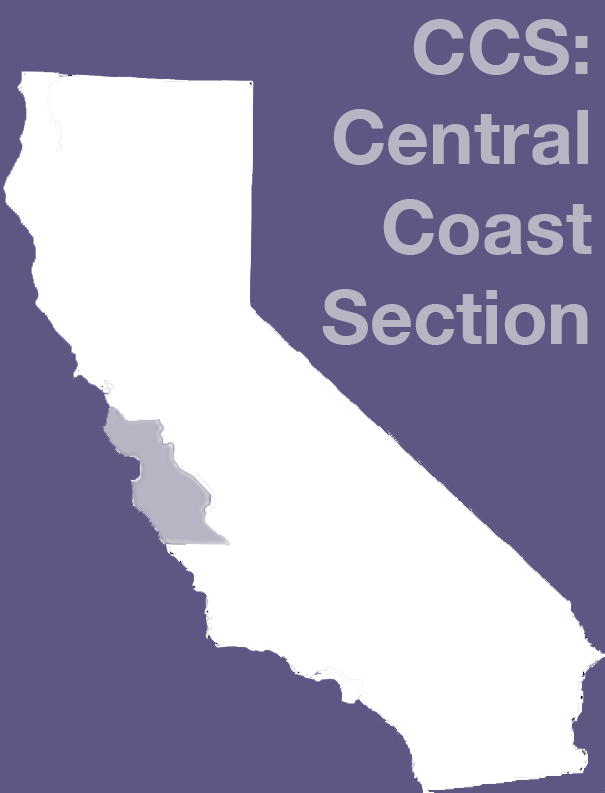
<style>
.page{position:relative;width:605px;height:793px;background:#5e5783}
.page>*{position:absolute;margin:0}
.t1{font:75px "HelveticaNeue-Bold";color:#b7b5c3}
</style>
<div class="page">
<p class="t1" style="left:322px;top:19px;width:270px;height:326px;text-align:right">CCS:<br>Central<br>Coast<br>Section</p>
</div>
